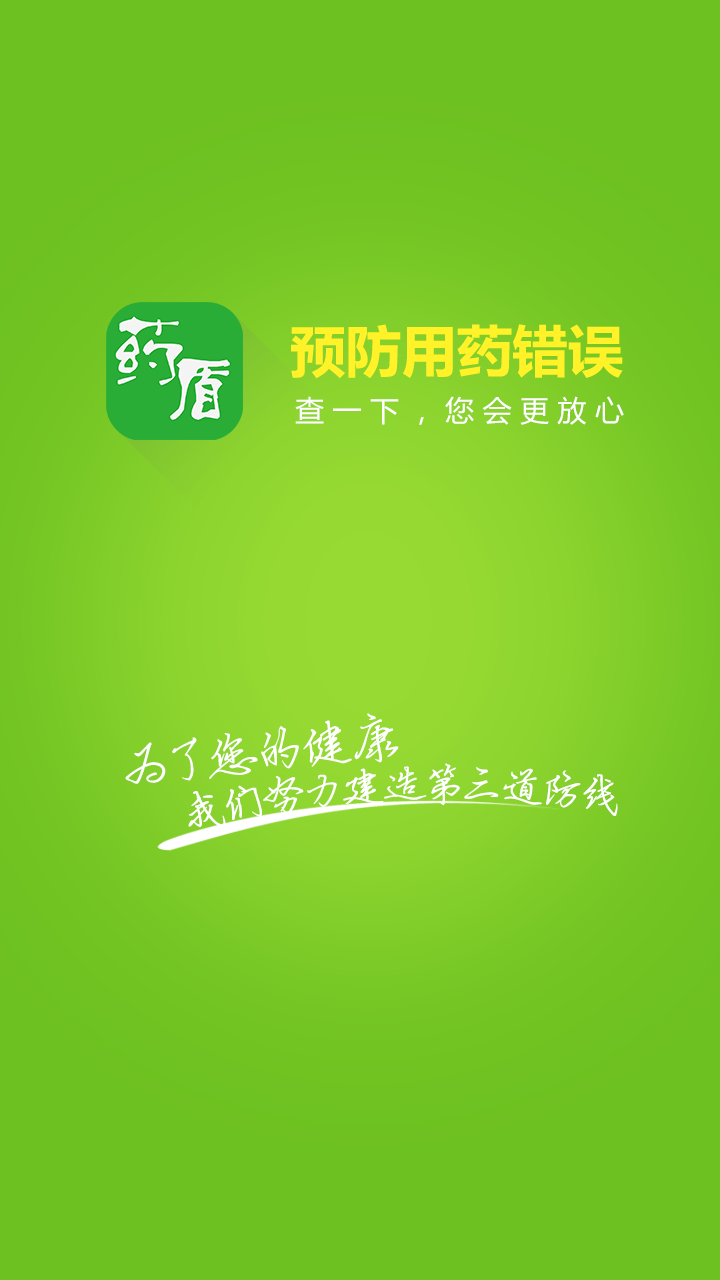
<style>
.page{position:relative;width:720px;height:1280px;background:#6dc120}
.page>*{position:absolute;margin:0}
.t1{font:55.2px "MicrosoftYaHei-Bold";color:#fff228}
.t2{font:28.8px "MicrosoftYaHei";color:#ffffff}
.t3{font:52.5px "FZYBXSJW--GB1-0";color:#ffffff}
.t4{font:42.6px "FZYBXSJW--GB1-0";color:#ffffff}
</style>
<div class="page">
<p class="t1" style="left:291px;top:324px;width:332px;height:55px">预防用药错误</p>
<p class="t2" style="left:295px;top:396px;width:329px;height:29px">查 一 下 ， 您 会 更 放 心</p>
<p class="t3" style="left:125px;top:713px;width:274px;height:71px;rotate:-7deg">为了您的健康</p>
<p class="t4" style="left:188px;top:763px;width:430px;height:65px;rotate:-2deg">我们努力建造第三道防线</p>
</div>
